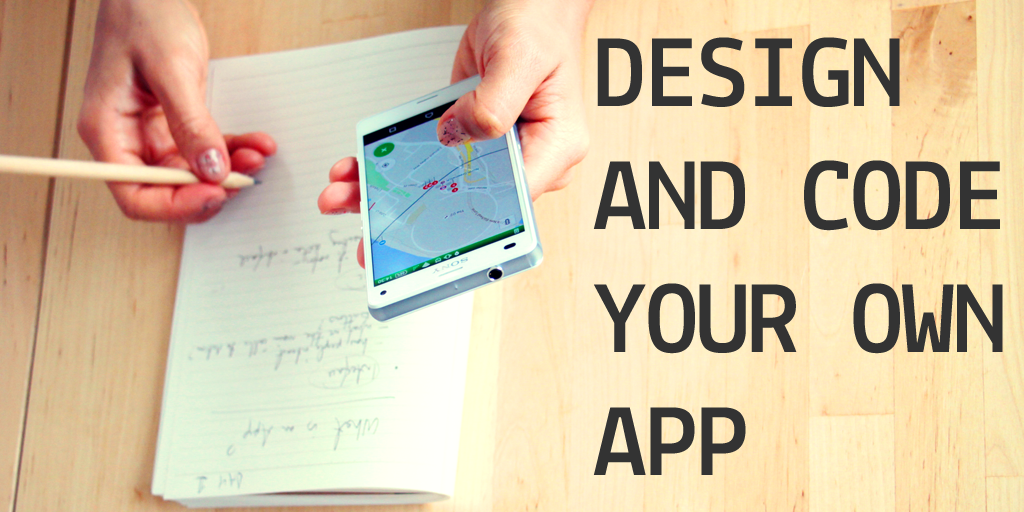
<style>
.page{position:relative;width:1024px;height:512px}
.page>*{position:absolute;margin:0}
.t1{font:102.6px "Lekton-Bold";color:#333333}
</style>
<div class="page">
<p class="t1" style="left:593px;top:37px;width:410px;height:438px">DESIGN AND CODE YOUR OWN APP</p>
</div>
